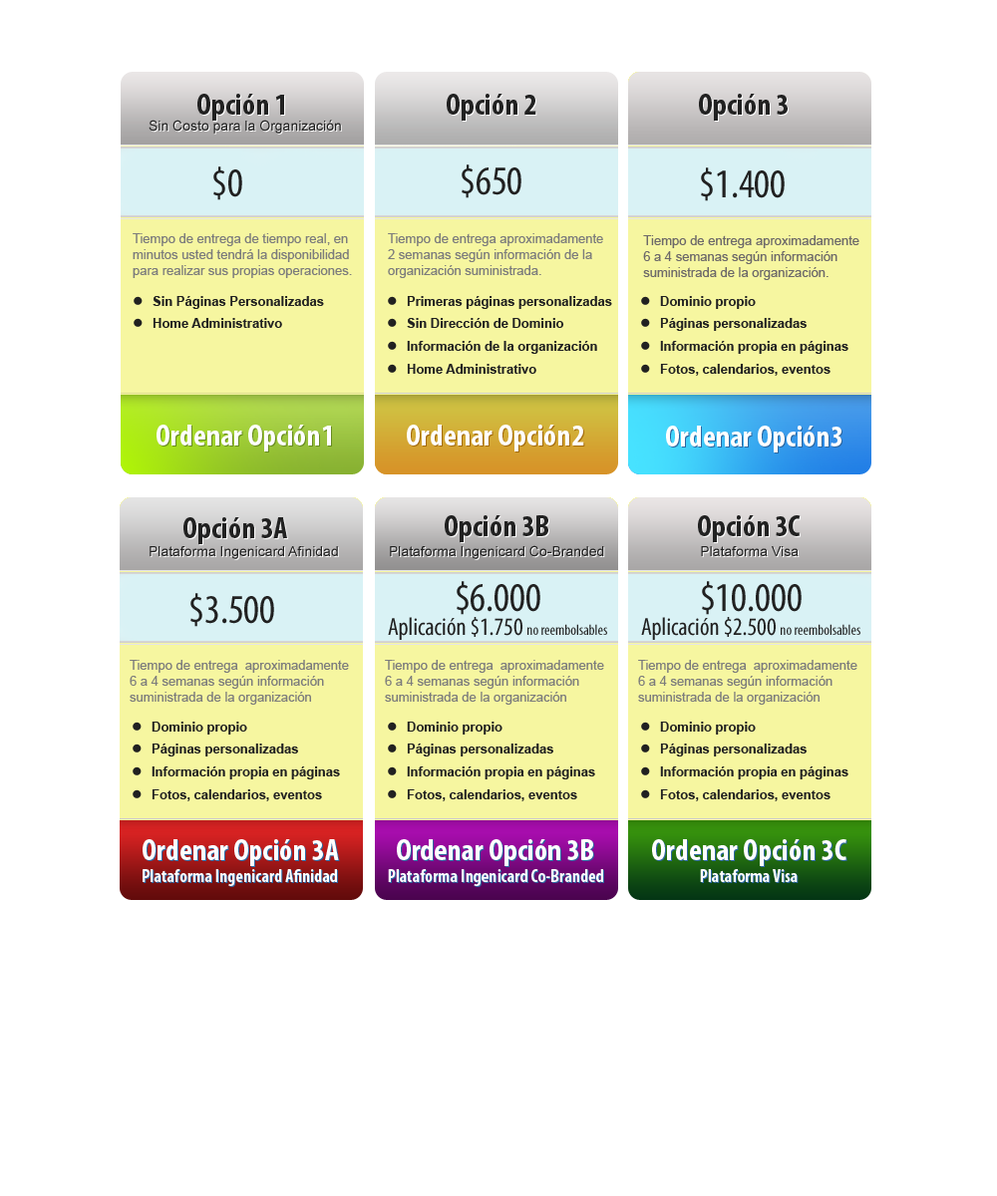
<style>
.page{position:relative;width:997px;height:1196px;background:#ffffff}
.page>*{position:absolute;margin:0}
.t1{font:30.9px "MyriadPro-BoldCond";color:#212121}
.t2{font:14px "ArialMT";color:#212121}
.t3{font:40.9px "MyriadPro-Cond";color:#212121}
.t4{font:13px/15.9px "ArialMT";color:#7c7c7c}
.t5{font:13px/15.9px "ArialMT";color:#6d6969}
.t6{font:13px "Arial-BoldMT";color:#212121}
.t7{font:30.9px "MyriadPro-BoldCond";color:#ffffff}
.t8{font:24.9px/23.9px "MyriadPro-Cond";color:#212121}
.t9{font:40.9px/23.9px "MyriadPro-Cond";color:#212121}
.t10{font:15px/23.9px "MyriadPro-Cond";color:#212121}
.t11{font:17.9px "MyriadPro-BoldCond";color:#ffffff}
</style>
<div class="page">
<p class="t1" style="left:197px;top:94px;width:87px;height:27px">Opción 1</p>
<p class="t1" style="left:447px;top:94px;width:89px;height:27px">Opción 2</p>
<p class="t1" style="left:699px;top:94px;width:89px;height:27px">Opción 3</p>
<p class="t2" style="left:149px;top:120px;width:192px;height:14px">Sin Costo para la Organización</p>
<p class="t3" style="left:213px;top:166px;width:29px;height:34px">$0</p>
<p class="t3" style="left:462px;top:164px;width:59px;height:34px">$650</p>
<p class="t3" style="left:701px;top:167px;width:84px;height:34px">$1.400</p>
<p class="t4" style="left:133px;top:233px;width:219px;height:45px">Tiempo de entrega de tiempo real, en minutos usted tendrá la disponibilidad para realizar sus propias operaciones.</p>
<p class="t4" style="left:388px;top:233px;width:215px;height:45px">Tiempo de entrega aproximadamente  2 semanas según información de la organización suministrada.</p>
<p class="t5" style="left:643px;top:235px;width:216px;height:45px">Tiempo de entrega aproximadamente 6 a 4 semanas según información suministrada de la organización.</p>
<p class="t6" style="left:153px;top:296px;width:171px;height:13px">Sin Páginas Personalizadas</p>
<p class="t6" style="left:407px;top:296px;width:205px;height:13px">Primeras páginas personalizadas</p>
<p class="t6" style="left:660px;top:296px;width:96px;height:13px">Dominio propio</p>
<p class="t6" style="left:153px;top:318px;width:129px;height:10px">Home Administrativo</p>
<p class="t6" style="left:407px;top:318px;width:157px;height:10px">Sin Dirección de Dominio</p>
<p class="t6" style="left:660px;top:318px;width:146px;height:13px">Páginas personalizadas</p>
<p class="t6" style="left:407px;top:341px;width:190px;height:13px">Información de la organización</p>
<p class="t6" style="left:660px;top:341px;width:188px;height:13px">Información propia en páginas</p>
<p class="t6" style="left:407px;top:364px;width:129px;height:10px">Home Administrativo</p>
<p class="t6" style="left:660px;top:364px;width:170px;height:12px">Fotos, calendarios, eventos</p>
<p class="t7" style="left:157px;top:425px;width:174px;height:27px">Ordenar Opción1</p>
<p class="t7" style="left:407px;top:425px;width:177px;height:27px">Ordenar Opción2</p>
<p class="t7" style="left:666px;top:426px;width:175px;height:27px">Ordenar Opción3</p>
<p class="t1" style="left:183px;top:517px;width:104px;height:27px">Opción 3A</p>
<p class="t1" style="left:445px;top:515px;width:103px;height:27px">Opción 3B</p>
<p class="t1" style="left:698px;top:515px;width:102px;height:27px">Opción 3C</p>
<p class="t2" style="left:390px;top:545px;width:214px;height:14px">Plataforma Ingenicard Co-Branded</p>
<p class="t2" style="left:150px;top:546px;width:188px;height:13px">Plataforma Ingenicard Afinidad</p>
<p class="t2" style="left:701px;top:546px;width:97px;height:10px">Plataforma Visa</p>
<p class="t8" style="left:388px;top:581px;width:219px;height:59px;text-align:center"><span class="t9">$6.000<br></span>Aplicación $1.750 <span class="t10">no reembolsables</span></p>
<p class="t8" style="left:641px;top:581px;width:219px;height:59px;text-align:center"><span class="t9">$10.000<br></span>Aplicación $2.500 <span class="t10">no reembolsables</span></p>
<p class="t3" style="left:190px;top:593px;width:84px;height:34px">$3.500</p>
<p class="t4" style="left:130px;top:660px;width:219px;height:45px">Tiempo de entrega  aproximadamente 6 a 4 semanas según información  suministrada de la organización suministrada.</p>
<p class="t4" style="left:385px;top:660px;width:219px;height:45px">Tiempo de entrega  aproximadamente 6 a 4 semanas según información  suministrada de la organización suministrada.</p>
<p class="t4" style="left:638px;top:660px;width:219px;height:45px">Tiempo de entrega  aproximadamente 6 a 4 semanas según información  suministrada de la organización suministrada.</p>
<p class="t6" style="left:152px;top:722px;width:95px;height:13px">Dominio propio</p>
<p class="t6" style="left:407px;top:722px;width:95px;height:13px">Dominio propio</p>
<p class="t6" style="left:660px;top:722px;width:96px;height:13px">Dominio propio</p>
<p class="t6" style="left:152px;top:744px;width:146px;height:13px">Páginas personalizadas</p>
<p class="t6" style="left:407px;top:744px;width:146px;height:13px">Páginas personalizadas</p>
<p class="t6" style="left:660px;top:744px;width:146px;height:13px">Páginas personalizadas</p>
<p class="t6" style="left:152px;top:767px;width:188px;height:13px">Información propia en páginas</p>
<p class="t6" style="left:407px;top:767px;width:188px;height:13px">Información propia en páginas</p>
<p class="t6" style="left:660px;top:767px;width:188px;height:13px">Información propia en páginas</p>
<p class="t6" style="left:152px;top:789px;width:170px;height:12px">Fotos, calendarios, eventos</p>
<p class="t6" style="left:407px;top:789px;width:170px;height:12px">Fotos, calendarios, eventos</p>
<p class="t6" style="left:660px;top:789px;width:170px;height:12px">Fotos, calendarios, eventos</p>
<p class="t11" style="left:143px;top:839px;width:196px;height:47px"><span class="t7">Ordenar Opción 3A<br></span>Plataforma Ingenicard Afinidad</p>
<p class="t11" style="left:388px;top:839px;width:215px;height:47px;text-align:center"><span class="t7">Ordenar Opción 3B<br></span>Plataforma Ingenicard Co-Branded</p>
<p class="t7" style="left:652px;top:839px;width:194px;height:43px;text-align:center">Ordenar Opción 3C<br><span class="t11">Plataforma Visa</span></p>
</div>
